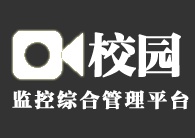
<style>
.page{position:relative;width:195px;height:138px;background:#333333}
.page>*{position:absolute;margin:0}
.t1{font:48px "FZFYSJW--GB1-0";letter-spacing:0.1em;color:#ffffff;font-weight:bold}
.t2{font:20px "FZFYSJW--GB1-0";letter-spacing:0.1em;color:#ffffff;font-weight:bold}
</style>
<div class="page">
<p class="t1" style="left:88px;top:32px;width:48px;height:46px">校</p>
<p class="t1" style="left:138px;top:32px;width:43px;height:46px">园</p>
<p class="t2" style="left:12px;top:90px;width:177px;height:20px">监控综合管理平台</p>
</div>
